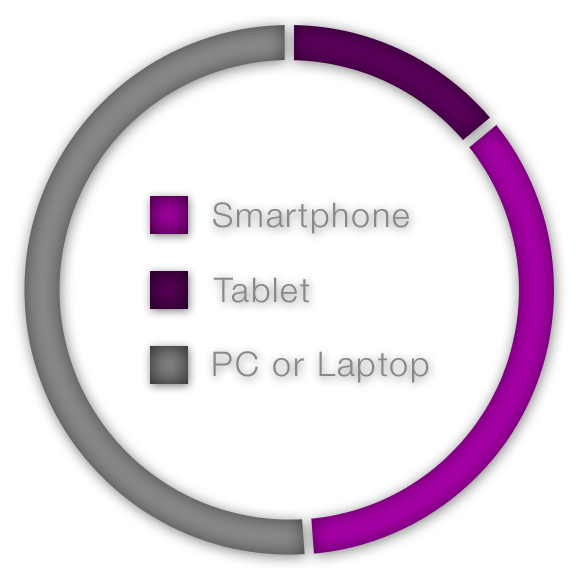
<style>
.page{position:relative;width:580px;height:580px;background:#ffffff}
.page>*{position:absolute;margin:0}
.t1{font:34px "HelveticaNeue-Light";letter-spacing:0.055em;color:#888888}
</style>
<div class="page">
<p class="t1" style="left:213px;top:202px;width:196px;height:32px">Smartphone</p>
<p class="t1" style="left:213px;top:277px;width:96px;height:26px">Tablet</p>
<p class="t1" style="left:213px;top:351px;width:216px;height:32px">PC or Laptop</p>
</div>
